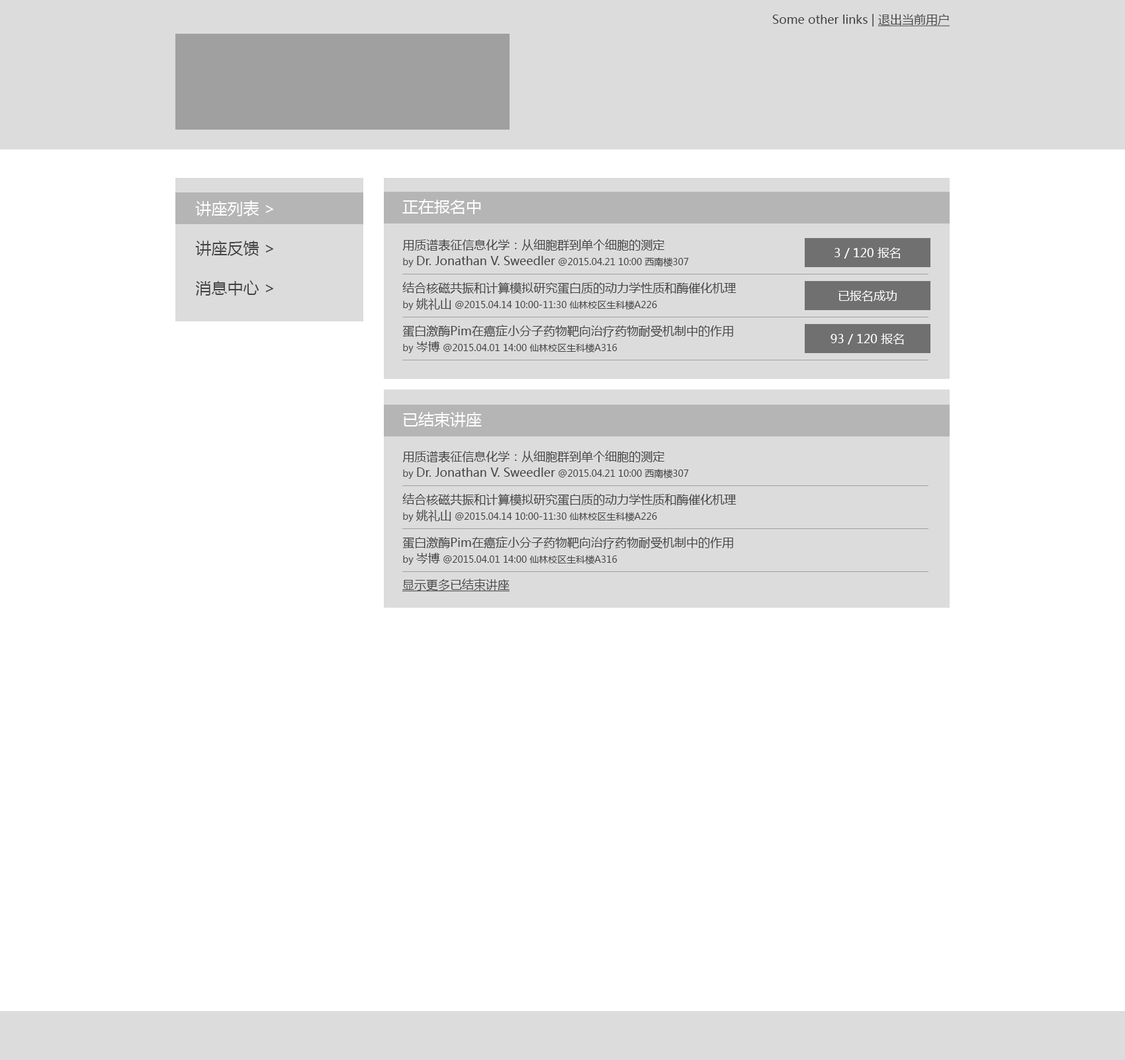
<style>
.page{position:relative;width:1125px;height:1060px;background:#ffffff}
.page>*{position:absolute;margin:0}
.t1{font:11.9px "MicrosoftYaHei";color:#434343}
.t2{font:11.9px "MicrosoftYaHei";color:#434343;text-decoration:underline}
.t3{font:15.9px/39.7px "MicrosoftYaHei";color:#434343}
.t4{font:15.9px/39.7px "MicrosoftYaHei";color:#ffffff}
.t5{font:15.9px "MicrosoftYaHei";color:#ffffff}
.t6{font:11.9px/15.9px "MicrosoftYaHei";color:#434343}
.t7{font:9.3px/15.9px "MicrosoftYaHei";color:#434343}
.t8{font:11.9px "MicrosoftYaHei";color:#ffffff}
</style>
<div class="page">
<p class="t1" style="left:772px;top:14px;width:177px;height:12px">Some other links | <span class="t2">退出当前用户</span></p>
<p class="t3" style="left:195px;top:200px;width:78px;height:96px"><span class="t4">讲座列表 &gt;<br></span>讲座反馈 &gt;<br>消息中心 &gt;</p>
<p class="t5" style="left:402px;top:199px;width:79px;height:15px">正在报名中</p>
<p class="t6" style="left:402px;top:239px;width:287px;height:28px">用质谱表征信息化学：从细胞群到单个细胞的测定<br><span class="t7">by </span>Dr. Jonathan V. Sweedler<span class="t7"> @2015.04.21 10:00 西南楼307</span></p>
<p class="t8" style="left:834px;top:247px;width:66px;height:12px">3 / 120 报名</p>
<p class="t7" style="left:402px;top:282px;width:334px;height:28px"><span class="t6">结合核磁共振和计算模拟研究蛋白质的动力学性质和酶催化机理<br></span>by <span class="t6">姚礼山</span> @2015.04.14 10:00-11:30 仙林校区生科楼A226</p>
<p class="t8" style="left:838px;top:290px;width:58px;height:12px">已报名成功</p>
<p class="t6" style="left:402px;top:325px;width:331px;height:28px">蛋白激酶Pim在癌症小分子药物靶向治疗药物耐受机制中的作用<br><span class="t7">by </span>岑博<span class="t7"> @2015.04.01 14:00 仙林校区生科楼A316</span></p>
<p class="t8" style="left:830px;top:333px;width:74px;height:12px">93 / 120 报名</p>
<p class="t5" style="left:403px;top:412px;width:79px;height:15px">已结束讲座</p>
<p class="t6" style="left:402px;top:450px;width:287px;height:29px">用质谱表征信息化学：从细胞群到单个细胞的测定<br><span class="t7">by </span>Dr. Jonathan V. Sweedler<span class="t7"> @2015.04.21 10:00 西南楼307</span></p>
<p class="t7" style="left:402px;top:493px;width:334px;height:29px"><span class="t6">结合核磁共振和计算模拟研究蛋白质的动力学性质和酶催化机理<br></span>by <span class="t6">姚礼山</span> @2015.04.14 10:00-11:30 仙林校区生科楼A226</p>
<p class="t6" style="left:402px;top:536px;width:331px;height:29px">蛋白激酶Pim在癌症小分子药物靶向治疗药物耐受机制中的作用<br><span class="t7">by </span>岑博<span class="t7"> @2015.04.01 14:00 仙林校区生科楼A316</span></p>
<p class="t2" style="left:402px;top:579px;width:107px;height:13px">显示更多已结束讲座</p>
</div>
